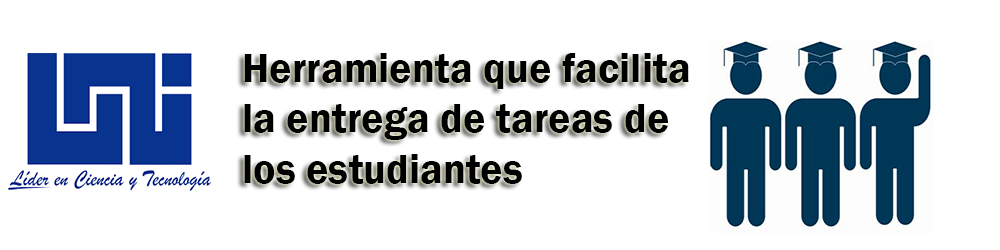
<style>
.page{position:relative;width:1000px;height:250px;background:#ffffff}
.page>*{position:absolute;margin:0}
.t1{font:42px "FranklinGothic-Demi";color:#000000}
</style>
<div class="page">
<p class="t1" style="left:244px;top:53px;width:445px;height:131px">Herramienta que facilita<br>la entrega de tareas de<br>los estudiantes</p>
</div>
